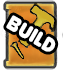
<style>
.page{position:relative;width:63px;height:70px;background:#ffffff}
.page>*{position:absolute;margin:0}
.t1{font:24px "Junegull";color:#ffffff}
</style>
<div class="page">
<p class="t1" style="left:6px;top:15px;width:50px;height:37px;rotate:30deg">BUILD</p>
</div>
